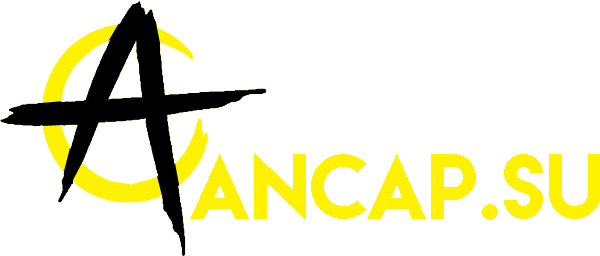
<style>
.page{position:relative;width:600px;height:256px;background:#ffffff}
.page>*{position:absolute;margin:0}
.t1{font:82px "LemonMilk";color:#fff200}
</style>
<div class="page">
<p class="t1" style="left:190px;top:153px;width:411px;height:67px">ANCAP.SU</p>
</div>
